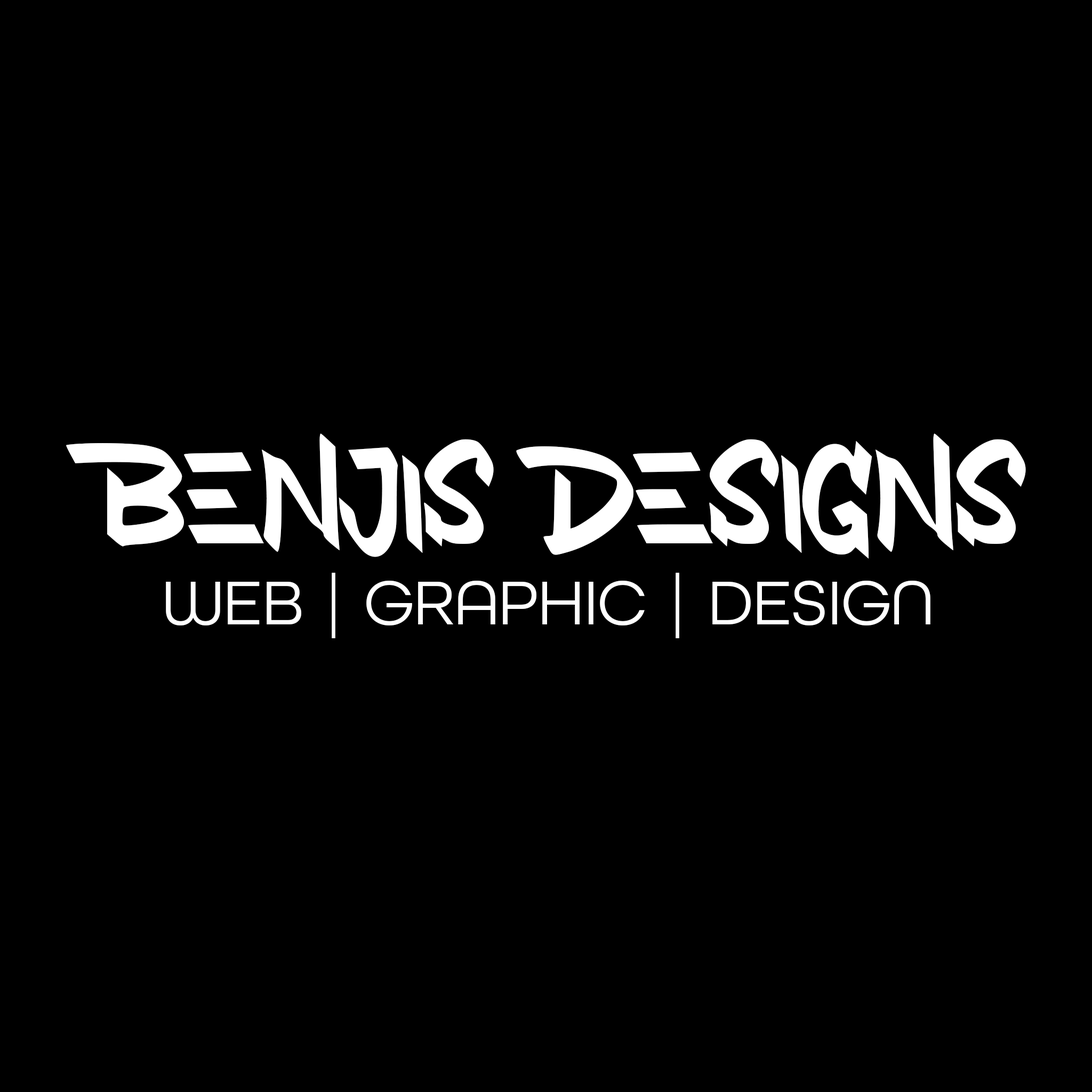
<style>
.page{position:relative;width:1092px;height:1092px;background:#000000}
.page>*{position:absolute;margin:0}
.t1{font:65.5px "AllRoundGothic-Book";color:#ffffff}
.t2{font:155.5px "NewkidsCrewDEMO";color:#ffffff}
</style>
<div class="page">
<p class="t1" style="left:66px;top:433px;width:960px;height:205px;text-align:center"><span class="t2">BENJIS DESIGNS<br></span>WEB | GRAPHIC | DESIGN</p>
</div>
